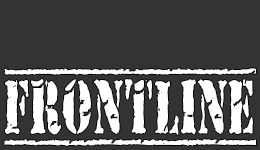
<style>
.page{position:relative;width:260px;height:150px;background:#333333}
.page>*{position:absolute;margin:0}
.t1{font:77.1px "OldStamper";color:#ffffff;scale:0.58 1}
</style>
<div class="page">
<p class="t1" style="left:4px;top:68px;width:252px;height:78px">FRONTLINE</p>
</div>
